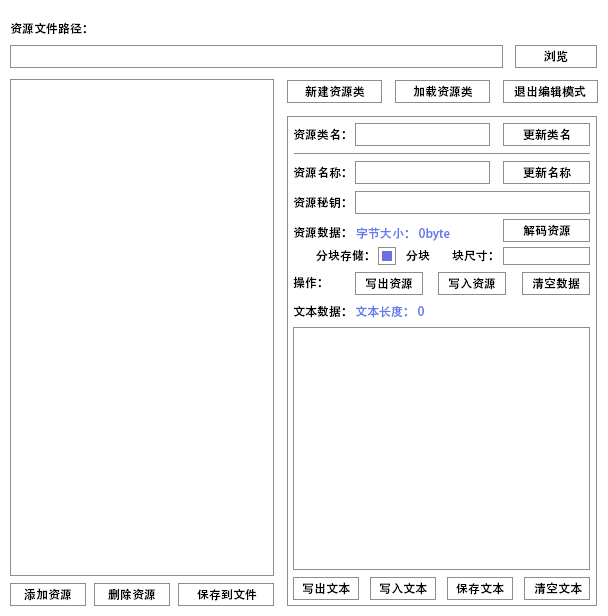
<style>
.page{position:relative;width:608px;height:616px;background:#ffffff}
.page>*{position:absolute;margin:0}
.t1{font:12px "AdobeHeitiStd-Regular";color:#000000}
.t2{font:12px "AdobeHeitiStd-Regular";color:#647aeb}
</style>
<div class="page">
<p class="t1" style="left:10px;top:22px;width:76px;height:13px">资源文件路径：</p>
<p class="t1" style="left:544px;top:50px;width:24px;height:12px">浏览</p>
<p class="t1" style="left:305px;top:85px;width:60px;height:13px">新建资源类</p>
<p class="t1" style="left:413px;top:85px;width:60px;height:13px">加载资源类</p>
<p class="t1" style="left:514px;top:85px;width:72px;height:13px">退出编辑模式</p>
<p class="t1" style="left:293px;top:128px;width:52px;height:13px">资源类名：</p>
<p class="t1" style="left:523px;top:128px;width:47px;height:13px">更新类名</p>
<p class="t1" style="left:293px;top:166px;width:52px;height:13px">资源名称：</p>
<p class="t1" style="left:523px;top:166px;width:48px;height:13px">更新名称</p>
<p class="t1" style="left:293px;top:196px;width:52px;height:13px">资源秘钥：</p>
<p class="t1" style="left:293px;top:226px;width:52px;height:13px">资源数据：</p>
<p class="t2" style="left:356px;top:227px;width:94px;height:14px">字节大小： 0byte</p>
<p class="t1" style="left:523px;top:224px;width:47px;height:13px">解码资源</p>
<p class="t1" style="left:316px;top:249px;width:52px;height:13px">分块存储：</p>
<p class="t1" style="left:406px;top:250px;width:24px;height:12px">分块</p>
<p class="t1" style="left:452px;top:250px;width:40px;height:12px">块尺寸：</p>
<p class="t1" style="left:293px;top:276px;width:28px;height:13px">操作：</p>
<p class="t1" style="left:366px;top:277px;width:46px;height:13px">写出资源</p>
<p class="t1" style="left:449px;top:277px;width:46px;height:13px">写入资源</p>
<p class="t1" style="left:532px;top:277px;width:48px;height:12px">清空数据</p>
<p class="t1" style="left:294px;top:305px;width:51px;height:13px">文本数据：</p>
<p class="t2" style="left:356px;top:305px;width:68px;height:13px">文本长度： 0</p>
<p class="t1" style="left:303px;top:582px;width:47px;height:13px">写出文本</p>
<p class="t1" style="left:380px;top:582px;width:47px;height:13px">写入文本</p>
<p class="t1" style="left:456px;top:582px;width:48px;height:13px">保存文本</p>
<p class="t1" style="left:534px;top:582px;width:48px;height:13px">清空文本</p>
<p class="t1" style="left:24px;top:588px;width:47px;height:13px">添加资源</p>
<p class="t1" style="left:108px;top:588px;width:47px;height:13px">删除资源</p>
<p class="t1" style="left:197px;top:589px;width:60px;height:12px">保存到文件</p>
</div>
